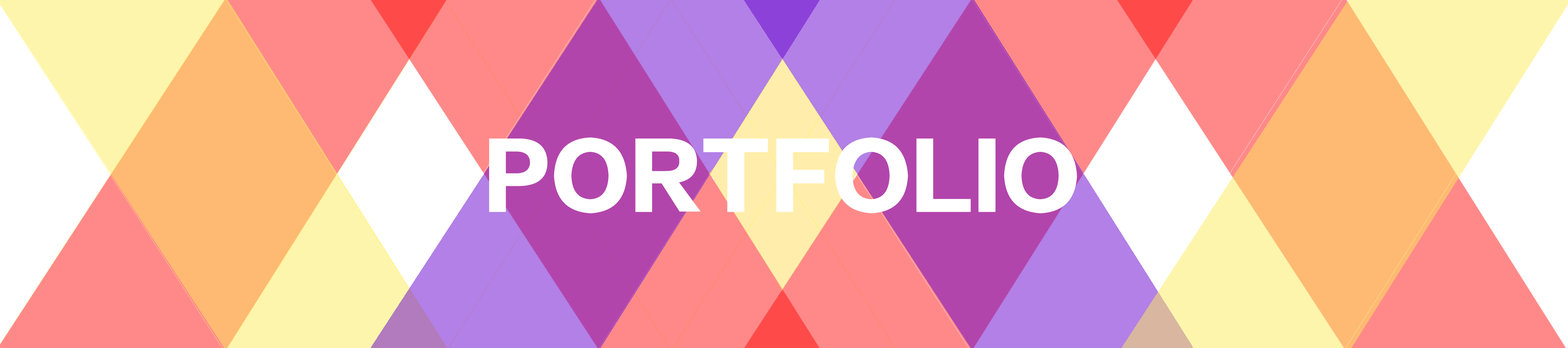
<style>
.page{position:relative;width:1568px;height:348px;background:#ff8989}
.page>*{position:absolute;margin:0}
.t1{font:85px "FZLTTHB--B51-0";color:#ffffff}
</style>
<div class="page">
<p class="t1" style="left:489px;top:138px;width:588px;height:75px">PORTFOLIO</p>
</div>
